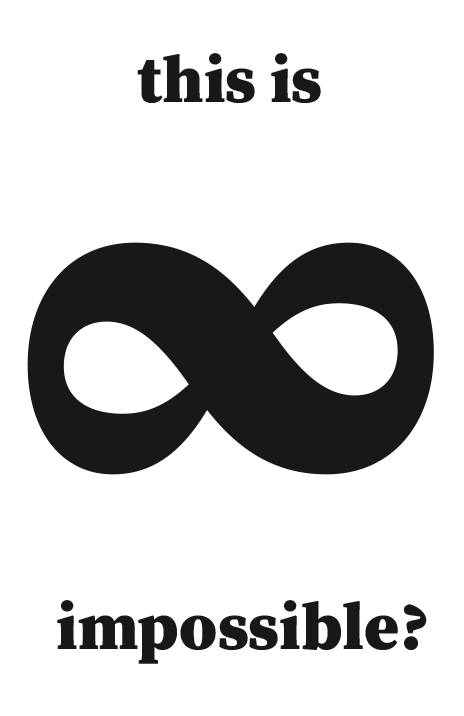
<style>
.page{position:relative;width:464px;height:716px;background:#ffffff}
.page>*{position:absolute;margin:0}
.t1{font:66.7px "SourceSerifRoman-Black";color:#181818}
.t2{font:555.6px "SourceSerifRoman-Black";color:#181818}
</style>
<div class="page">
<p class="t1" style="left:137px;top:53px;width:184px;height:50px">this is</p>
<p class="t2" style="left:27px;top:242px;width:407px;height:233px">∞</p>
<p class="t1" style="left:57px;top:600px;width:370px;height:64px">impossible?</p>
</div>
